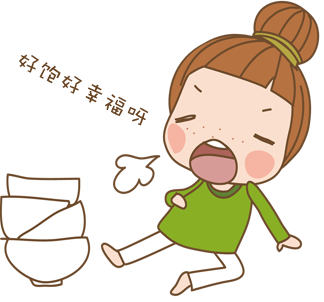
<style>
.page{position:relative;width:324px;height:302px;background:#ffffff}
.page>*{position:absolute;margin:0}
.t1{font:24px "DFWaWaSC-W5";color:#684322}
</style>
<div class="page">
<p class="t1" style="left:19px;top:54px;width:130px;height:72px;rotate:26deg">好饱好幸福呀</p>
</div>
